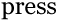
<style>
.page{position:relative;width:59px;height:21px;background:#ffffff}
.page>*{position:absolute;margin:0}
.t1{font:24px "Georgia";color:#000000}
</style>
<div class="page">
<p class="t1" style="left:1px;top:2px;width:55px;height:18px">press</p>
</div>
